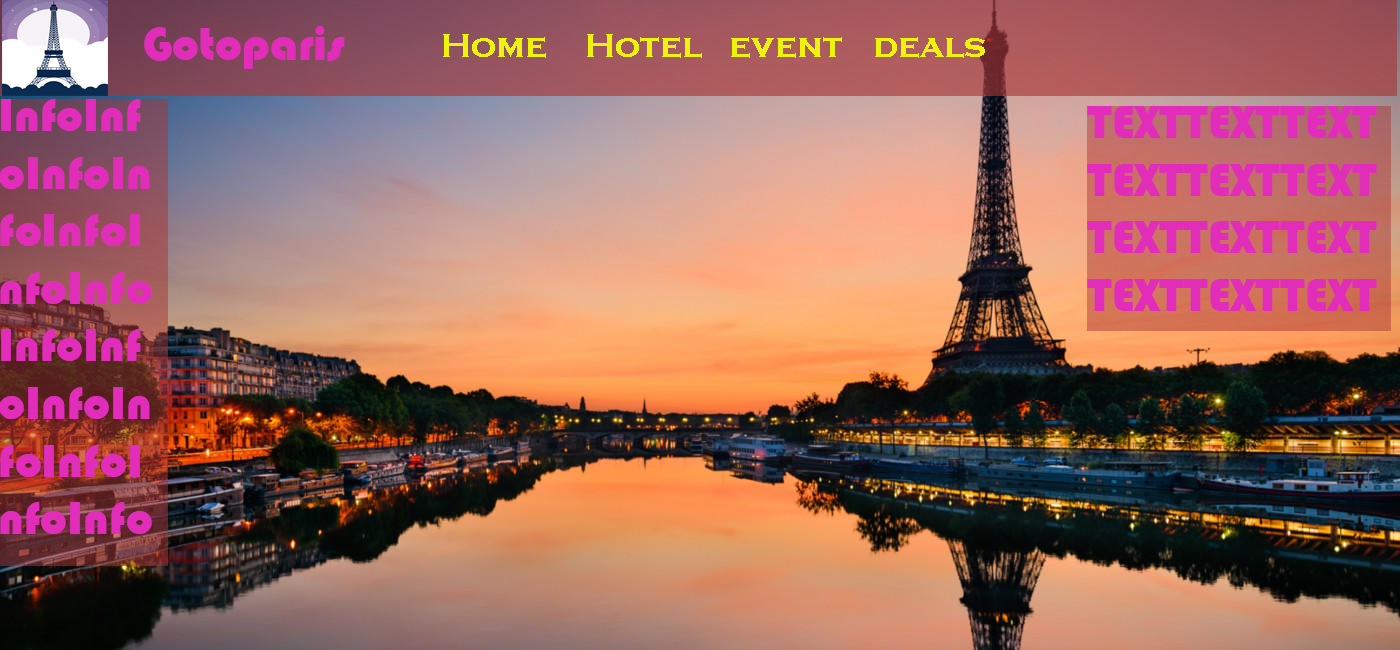
<style>
.page{position:relative;width:1400px;height:650px}
.page>*{position:absolute;margin:0}
.t1{font:48px "Bauhaus93";color:#e12db9}
.t2{font:35px "CopperplateGothic-Bold";color:#ecf40e}
</style>
<div class="page">
<p class="t1" style="left:144px;top:26px;width:201px;height:43px">Gotoparis</p>
<p class="t2" style="left:443px;top:34px;width:542px;height:24px">Home  Hotel event deals</p>
<p class="t1" style="left:0px;top:98px;width:152px;height:436px">InfoInfoInfoInfoInfoInfoInfoInfoInfoInfoInfoInfoInfoInfo</p>
<p class="t1" style="left:1087px;top:106px;width:290px;height:205px">TEXTTEXTTEXTTEXTTEXTTEXTTEXTTEXTTEXTTEXTTEXTTEXT</p>
</div>
